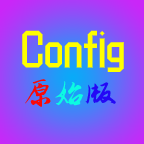
<style>
.page{position:relative;width:144px;height:144px}
.page>*{position:absolute;margin:0}
.t1{font:50px "butter";color:#ffff00}
.t2{font:35px "ZhiMangXing-Regular";color:#fa0908}
.t3{font:35px "ZhiMangXing-Regular";color:#0cfbe2}
.t4{font:35px "ZhiMangXing-Regular";color:#2408f6}
</style>
<div class="page">
<p class="t1" style="left:22px;top:30px;width:102px;height:43px">Config</p>
<p class="t2" style="left:24px;top:79px;width:92px;height:28px">原<span class="t3">始</span><span class="t4">版</span></p>
</div>
